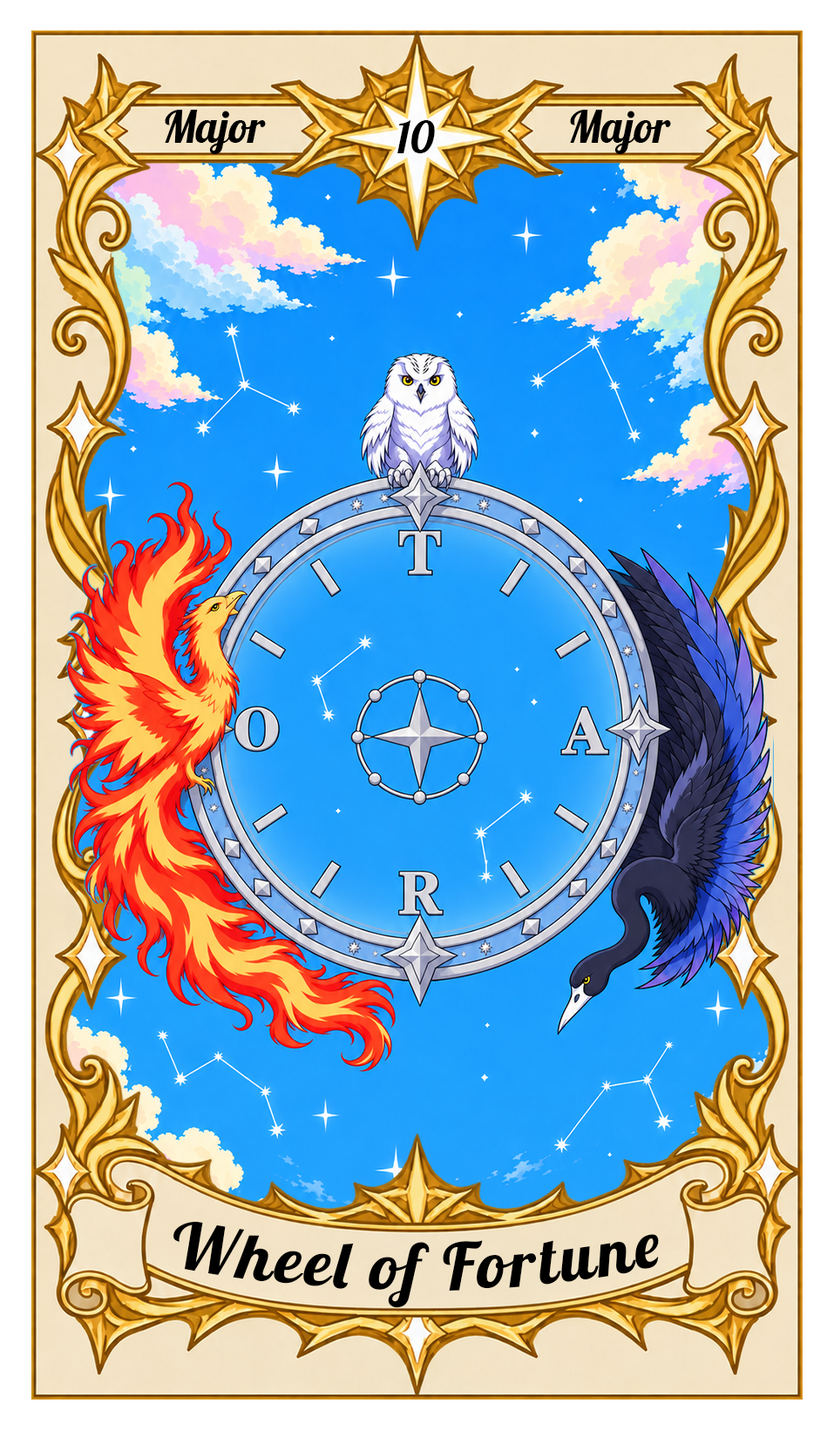
<style>
.page{position:relative;width:834px;height:1430px}
.page>*{position:absolute;margin:0}
.t1{font:43.6px "Lobster-Regular";color:#000000}
.t2{font:65.3px "Lobster-Regular";letter-spacing:0.05em;color:#000000}
</style>
<div class="page">
<p class="t1" style="left:165px;top:110px;width:101px;height:44px">Major</p>
<p class="t1" style="left:570px;top:110px;width:101px;height:44px">Major</p>
<p class="t1" style="left:397px;top:120px;width:38px;height:33px">10</p>
<p class="t2" style="left:173px;top:1221px;width:486px;height:87px">Wheel of Fortune</p>
</div>
